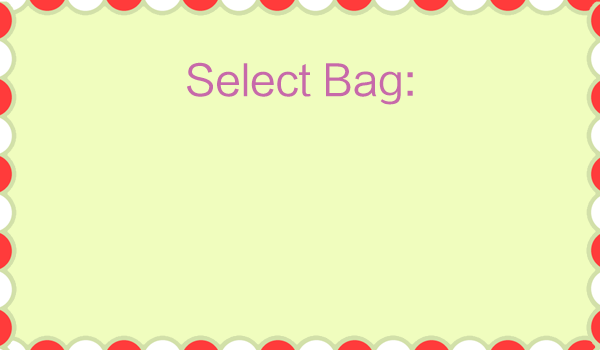
<style>
.page{position:relative;width:600px;height:350px;background:#f0fdbe}
.page>*{position:absolute;margin:0}
.t1{font:41.7px "LTHYSZK";color:#c769aa}
</style>
<div class="page">
<p class="t1" style="left:187px;top:62px;width:226px;height:43px">Select Bag:</p>
</div>
